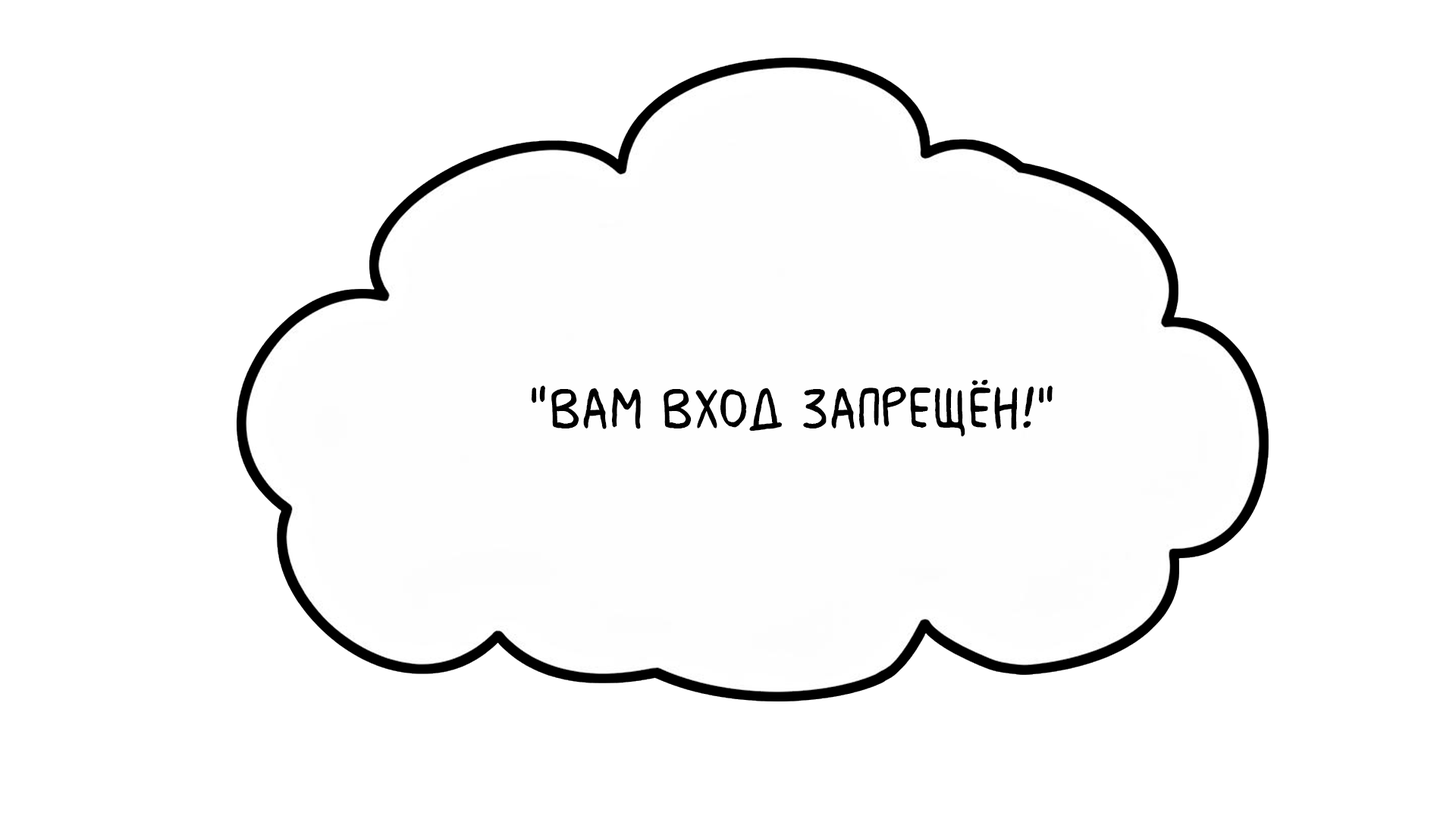
<style>
.page{position:relative;width:1456px;height:819px;background:#ffffff}
.page>*{position:absolute;margin:0}
.t1{font:60.7px "MilkMustacheBB";color:#000000}
</style>
<div class="page">
<p class="t1" style="left:531px;top:379px;width:522px;height:58px">"Вам вход запрещён!"</p>
</div>
